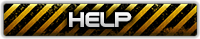
<style>
.page{position:relative;width:200px;height:39px}
.page>*{position:absolute;margin:0}
.t1{font:24px "SteelWolf-Medium"}
</style>
<div class="page">
<p class="t1" style="left:69px;top:12px;width:63px;height:15px">help</p>
</div>
